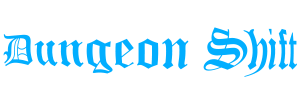
<style>
.page{position:relative;width:300px;height:100px;background:#ffffff}
.page>*{position:absolute;margin:0}
.t1{font:48px "OldEnglishTextMT";color:#01aeff}
</style>
<div class="page">
<p class="t1" style="left:3px;top:27px;width:294px;height:50px">Dungeon Shift</p>
</div>
